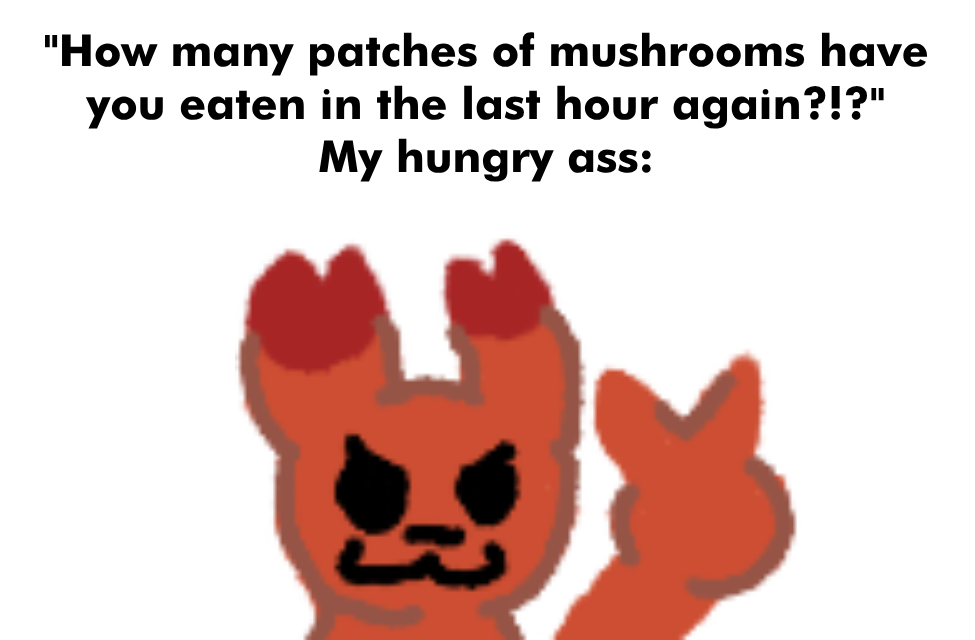
<style>
.page{position:relative;width:975px;height:640px;background:#ffffff}
.page>*{position:absolute;margin:0}
.t1{font:44px "Futura-Bold";color:#000000}
</style>
<div class="page">
<p class="t1" style="left:45px;top:32px;width:883px;height:150px;text-align:center">"How many patches of mushrooms have<br>you eaten in the last hour again?!?"<br>My hungry ass:</p>
</div>
